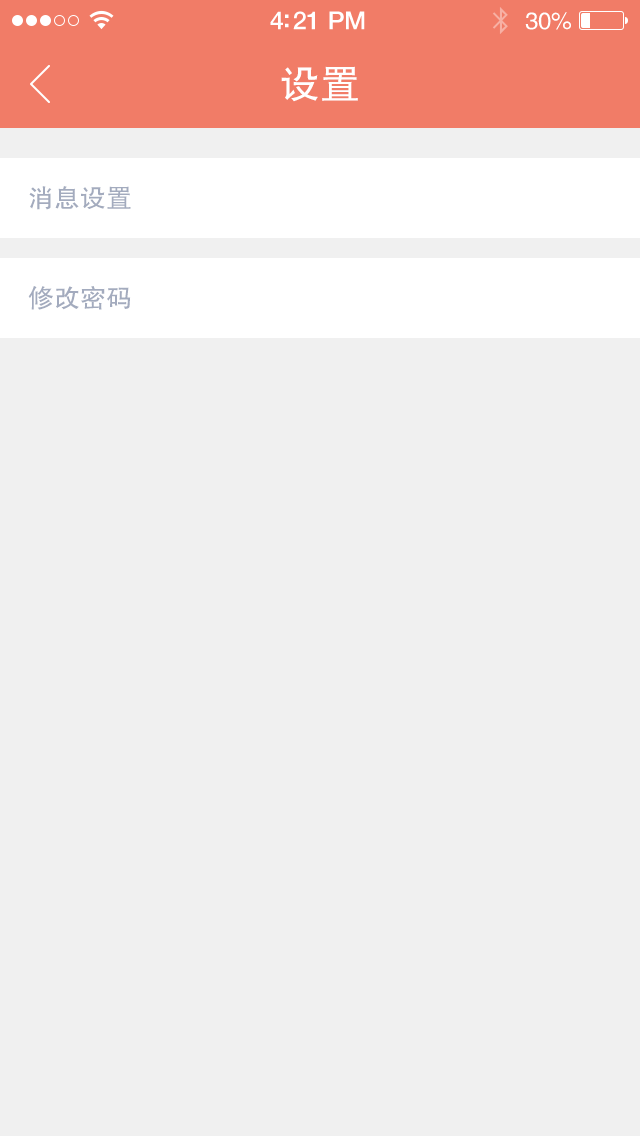
<style>
.page{position:relative;width:640px;height:1136px;background:#f0f0f0}
.page>*{position:absolute;margin:0}
.t1{font:25px "HelveticaNeue-Medium";letter-spacing:-0.02em;color:#ffffff}
.t2{font:24px "FZHTJW--GB1-0";letter-spacing:-0.02em;color:#ffffff}
.t3{font:40px "FZHTJW--GB1-0";color:#ffffff}
.t4{font:26px "FZHTJW--GB1-0";color:#a3abbe}
</style>
<div class="page">
<p class="t1" style="left:270px;top:11px;width:95px;height:19px">4:21 PM</p>
<p class="t2" style="left:525px;top:12px;width:46px;height:18px">30%</p>
<p class="t3" style="left:281px;top:66px;width:77px;height:36px">设置</p>
<p class="t4" style="left:29px;top:186px;width:102px;height:24px">消息设置</p>
<p class="t4" style="left:28px;top:286px;width:103px;height:24px">修改密码</p>
</div>
